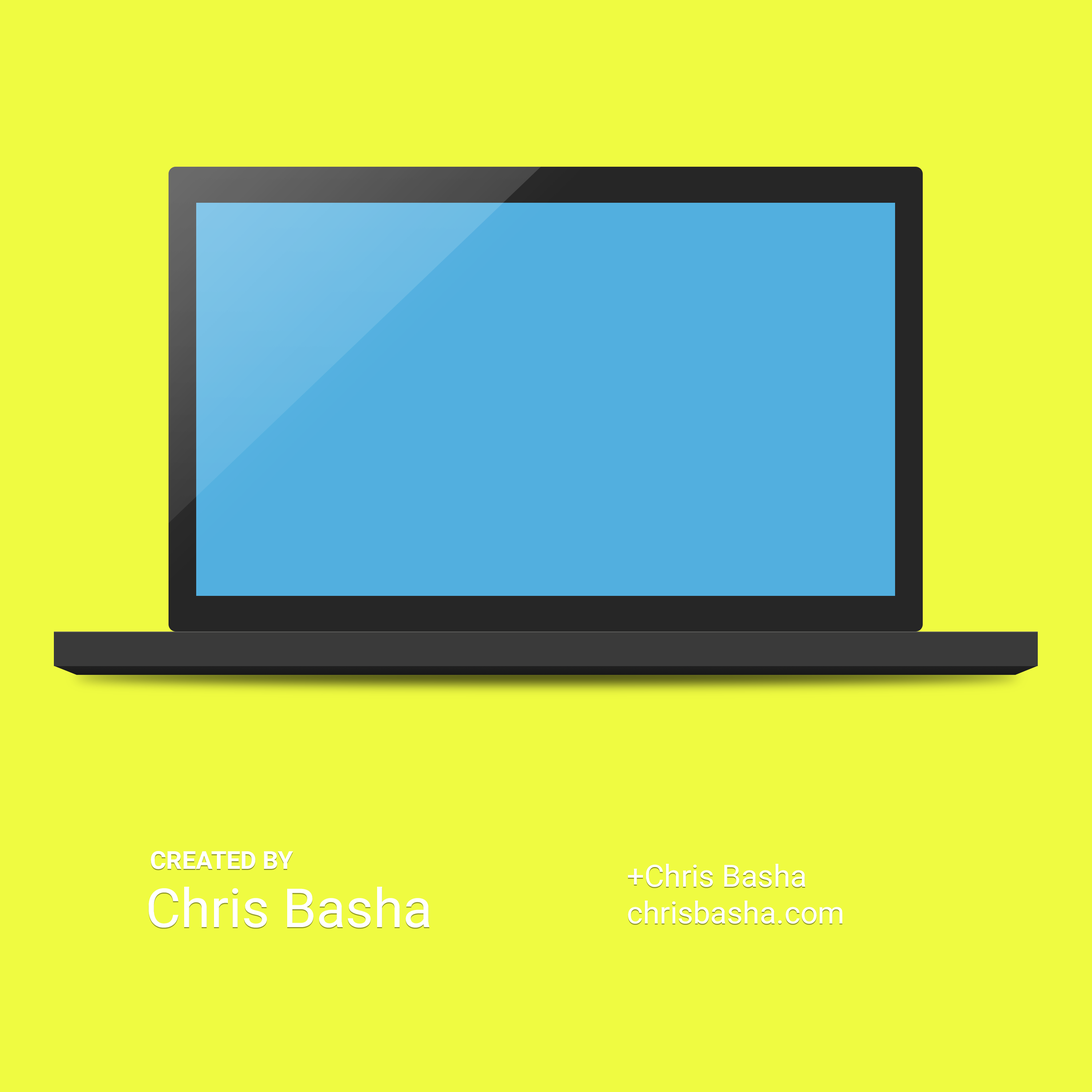
<style>
.page{position:relative;width:1092px;height:1092px;background:#effb41}
.page>*{position:absolute;margin:0}
.t1{font:24.8px "Roboto-Bold";color:#ffffff}
.t2{font:30.6px "Roboto-Black";color:#ffffff}
.t3{font:53.9px "Roboto-Black";color:#ffffff}
</style>
<div class="page">
<p class="t1" style="left:151px;top:851px;width:142px;height:18px">CREATED BY</p>
<p class="t2" style="left:628px;top:864px;width:214px;height:60px">+Chris Basha<br>chrisbasha.com</p>
<p class="t3" style="left:149px;top:887px;width:281px;height:41px">Chris Basha</p>
</div>
